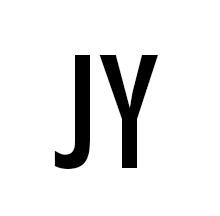
<style>
.page{position:relative;width:220px;height:216px;background:#ffffff}
.page>*{position:absolute;margin:0}
.t1{font:150px "FuturaStd-Condensed";color:#000000}
</style>
<div class="page">
<p class="t1" style="left:54px;top:55px;width:104px;height:115px">JY</p>
</div>
